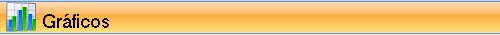
<style>
.page{position:relative;width:500px;height:35px}
.page>*{position:absolute;margin:0}
.t1{font:18px "MS Sans Serif";color:#000000}
</style>
<div class="page">
<p class="t1" style="left:43px;top:14px;width:66px;height:14px">Gráficos</p>
</div>
